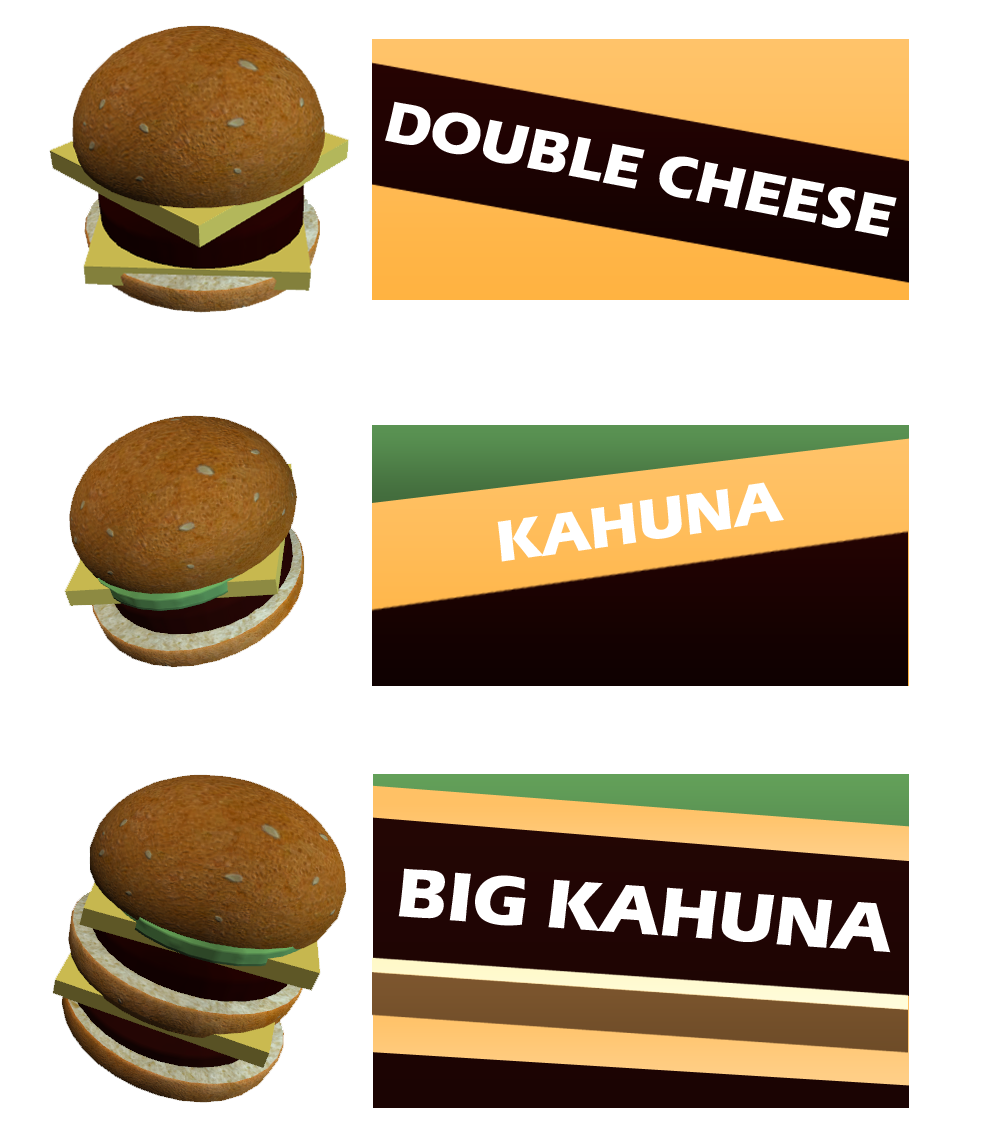
<style>
.page{position:relative;width:1000px;height:1134px;background:#ffffff}
.page>*{position:absolute;margin:0}
.t1{font:60px "ErasITC-Bold";color:#ffffff}
.t2{font:72px "ErasITC-Bold";color:#ffffff}
</style>
<div class="page">
<p class="t1" style="left:385px;top:101px;width:512px;height:136px;rotate:11deg">DOUBLE CHEESE</p>
<p class="t1" style="left:497px;top:482px;width:287px;height:80px;rotate:-8deg">KAHUNA</p>
<p class="t2" style="left:398px;top:868px;width:493px;height:85px;rotate:4deg">BIG KAHUNA</p>
</div>
